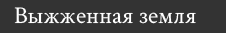
<style>
.page{position:relative;width:226px;height:33px;background:#333333}
.page>*{position:absolute;margin:0}
.t1{font:24px "CrimsonText-Regular";color:#ffffff}
</style>
<div class="page">
<p class="t1" style="left:14px;top:7px;width:182px;height:17px">Выжженная земля</p>
</div>
